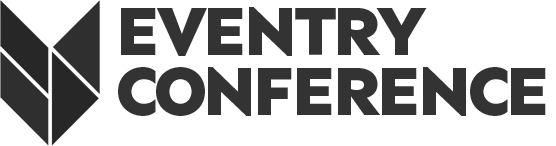
<style>
.page{position:relative;width:556px;height:146px;background:#ffffff}
.page>*{position:absolute;margin:0}
.t1{font:72px "Sen-ExtraBold";letter-spacing:-0.075em;color:#333333}
</style>
<div class="page">
<p class="t1" style="left:121px;top:7px;width:306px;height:49px">EVENTRY</p>
<p class="t1" style="left:118px;top:67px;width:428px;height:49px">CONFERENCE</p>
</div>
